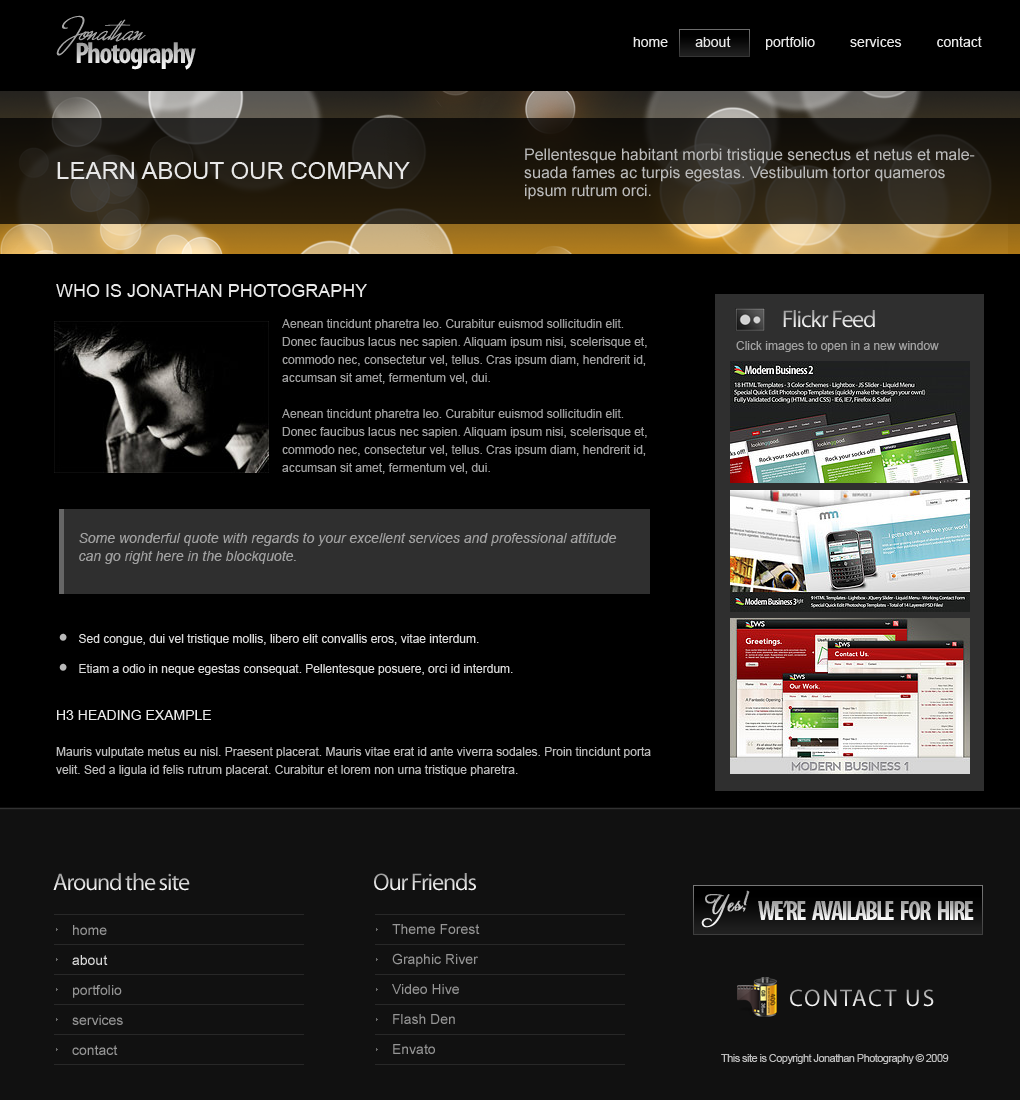
<style>
.page{position:relative;width:1020px;height:1100px;background:#000000}
.page>*{position:absolute;margin:0}
.t1{font:14px "ArialMT";color:#e8e8e8}
.t2{font:16px/18px "ArialMT";color:#bbbbbb}
.t3{font:24px "ArialMT";color:#e8e8e8}
.t4{font:18px "ArialMT";color:#e8e8e8}
.t5{font:12px "ArialMT";color:#3a3a3a}
.t6{font:24px "MyriadPro-Regular";letter-spacing:-0.05em}
.t7{font:12px/18px "ArialMT";color:#a1a1a1}
.t8{font:12px "ArialMT";color:#a1a1a1}
.t9{font:14px/18px "Arial-ItalicMT";color:#a1a1a1}
.t10{font:60px "ArnoPro-Regular";color:#b9b9b9}
.t11{font:12px/30px "ArialMT";color:#dadada}
.t12{font:12px/18px "ArialMT";color:#bbbbbb}
.t13{font:14px/18px "ArialMT";color:#e8e8e8}
.t14{font:27px "MyriadPro-BoldCond";letter-spacing:-0.075em}
.t15{font:14px/30px "ArialMT";color:#969696}
.t16{font:14px/30px "ArialMT";color:#dcdcdc}
.t17{font:24px "MyriadPro-Regular";letter-spacing:0.075em}
.t18{font:11px "ArialMT";letter-spacing:-0.05em;color:#bdbdbd}
</style>
<div class="page">
<p class="t1" style="left:633px;top:36px;width:349px;height:14px">home       about         portfolio         services         contact</p>
<p class="t2" style="left:524px;top:148px;width:451px;height:52px">Pellentesque habitant morbi tristique senectus et netus et malesuada fames ac turpis egestas. Vestibulum tortor quameros ipsum rutrum orci.</p>
<p class="t3" style="left:57px;top:162px;width:353px;height:17px">LEARN ABOUT OUR COMPANY</p>
<p class="t4" style="left:56px;top:284px;width:311px;height:13px"><span class="t5"><br></span>WHO IS JONATHAN PHOTOGRAPHY</p>
<p class="t6" style="left:783px;top:310px;width:92px;height:18px">Flickr Feed</p>
<p class="t7" style="left:282px;top:319px;width:365px;height:155px">Aenean tincidunt pharetra leo. Curabitur euismod sollicitudin elit. Donec faucibus lacus nec sapien. Aliquam ipsum nisi, scelerisque et, commodo nec, consectetur vel, tellus. Cras ipsum diam, hendrerit id, accumsan sit amet, fermentum vel, dui.<br><br>Aenean tincidunt pharetra leo. Curabitur euismod sollicitudin elit. Donec faucibus lacus nec sapien. Aliquam ipsum nisi, scelerisque et, commodo nec, consectetur vel, tellus. Cras ipsum diam, hendrerit id, accumsan sit amet, fermentum vel, dui.</p>
<p class="t8" style="left:736px;top:341px;width:203px;height:11px">Click images to open in a new window</p>
<p class="t9" style="left:79px;top:533px;width:538px;height:31px">Some wonderful quote with regards to your excellent services and professional attitude can go right here in the blockquote.</p>
<p class="t10" style="left:59px;top:633px;width:8px;height:8px">.</p>
<p class="t11" style="left:79px;top:634px;width:434px;height:41px">Sed congue, dui vel tristique mollis, libero elit convallis eros, vitae interdum.<br>Etiam a odio in neque egestas consequat. Pellentesque posuere, orci id interdum.</p>
<p class="t10" style="left:59px;top:663px;width:8px;height:8px">.</p>
<p class="t12" style="left:56px;top:710px;width:595px;height:66px"><span class="t13">H3 HEADING EXAMPLE<br><br></span>Mauris vulputate metus eu nisl. Praesent placerat. Mauris vitae erat id ante viverra sodales. Proin tincidunt porta velit. Sed a ligula id felis rutrum placerat. Curabitur et lorem non urna tristique pharetra.</p>
<p class="t6" style="left:53px;top:873px;width:137px;height:18px">Around the site</p>
<p class="t6" style="left:374px;top:873px;width:102px;height:18px">Our Friends</p>
<p class="t14" style="left:758px;top:900px;width:216px;height:20px">WE’RE   AVAILABLE   FOR   HIRE</p>
<p class="t15" style="left:72px;top:925px;width:51px;height:130px">home<br><span class="t16">about<br></span>portfolio<br>services<br>contact</p>
<p class="t15" style="left:392px;top:924px;width:88px;height:130px">Theme Forest<br>Graphic River<br>Video Hive<br>Flash Den<br>Envato</p>
<p class="t17" style="left:790px;top:989px;width:144px;height:18px">CONTACT US</p>
<p class="t18" style="left:721px;top:1054px;width:228px;height:10px">This site is Copyright Jonathan Photography © 2009</p>
</div>
